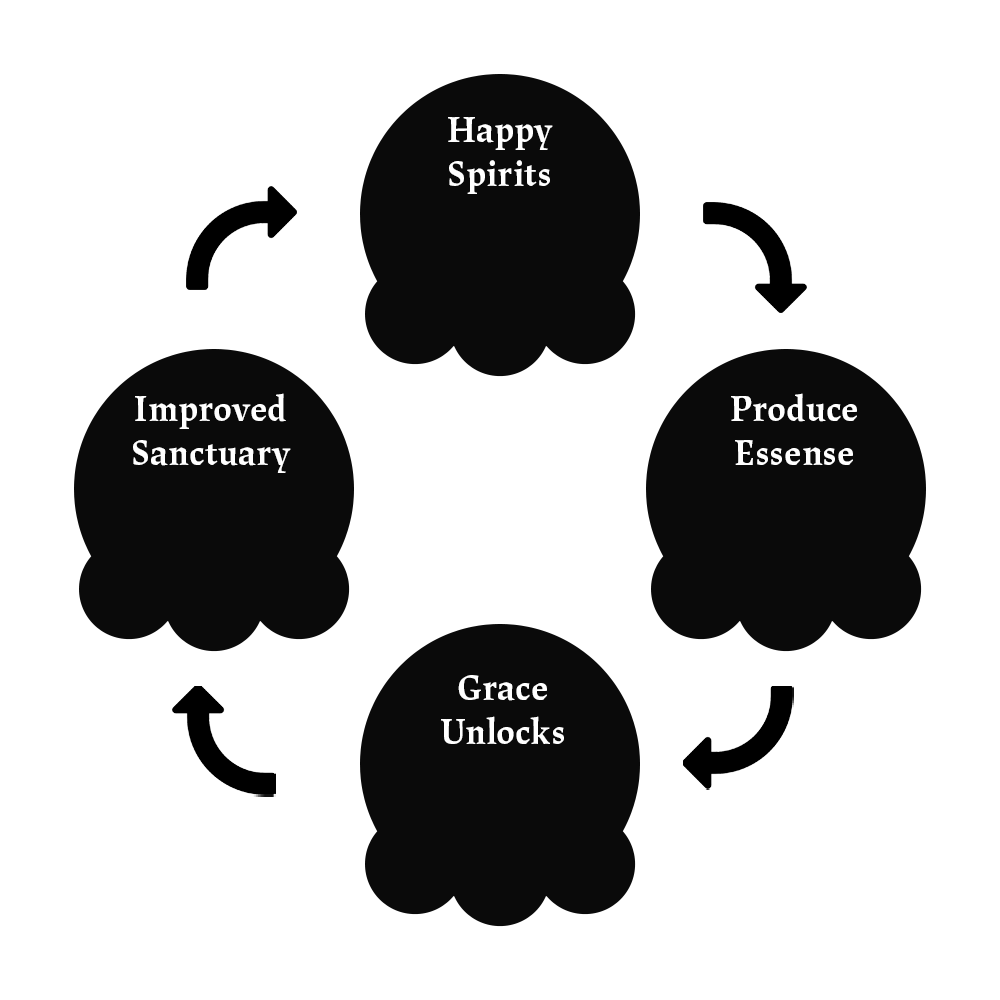
<style>
.page{position:relative;width:1000px;height:1000px;background:#ffffff}
.page>*{position:absolute;margin:0}
.t1{font:36px "LaptureDisplay-Bold";color:#ffffff}
</style>
<div class="page">
<p class="t1" style="left:448px;top:117px;width:105px;height:77px;text-align:center">Happy<br>Spirits</p>
<p class="t1" style="left:133px;top:393px;width:158px;height:80px;text-align:center">Improved<br>Sanctuary</p>
<p class="t1" style="left:731px;top:393px;width:126px;height:72px;text-align:center">Produce<br>Essense</p>
<p class="t1" style="left:441px;top:675px;width:123px;height:69px;text-align:center">Grace<br>Unlocks</p>
</div>
